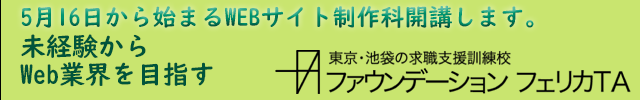
<style>
.page{position:relative;width:640px;height:100px;background:#c9e56f}
.page>*{position:absolute;margin:0}
.t1{font:24px "UDDigiKyokashoN-B"}
.t2{font:26px/28px "UDDigiKyokashoN-B";color:#00543b}
</style>
<div class="page">
<p class="t1" style="left:21px;top:5px;width:513px;height:23px">5月16日から始まるWEBサイト制作科開講します。</p>
<p class="t2" style="left:20px;top:34px;width:193px;height:53px">未経験から<br>Web業界を目指す</p>
</div>
